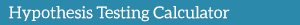
<style>
.page{position:relative;width:300px;height:25px;background:#2b89ac}
.page>*{position:absolute;margin:0}
.t1{font:16.6px "Aleo-Regular";color:#ffffff}
</style>
<div class="page">
<p class="t1" style="left:9px;top:6px;width:221px;height:16px">Hypothesis Testing Calculator</p>
</div>
